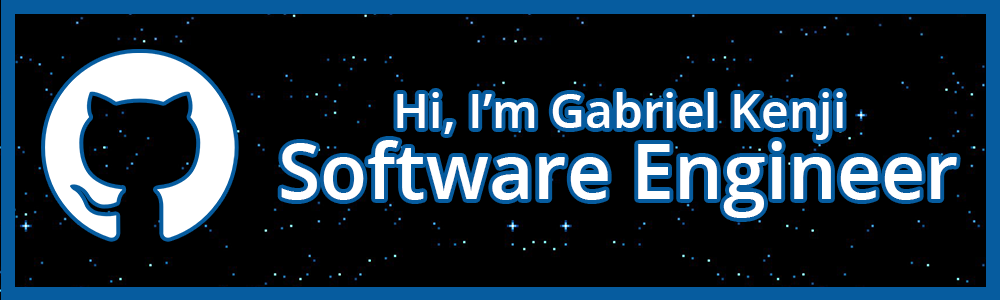
<style>
.page{position:relative;width:1000px;height:300px;background:#000000}
.page>*{position:absolute;margin:0}
.t1{font:48px "OpenSans-Semibold";color:#ffffff}
.t2{font:77.1px "OpenSans-Semibold";color:#ffffff}
</style>
<div class="page">
<p class="t1" style="left:397px;top:92px;width:446px;height:48px">Hi, I’m Gabriel Kenji</p>
<p class="t2" style="left:281px;top:140px;width:676px;height:78px">Software Engineer</p>
</div>
